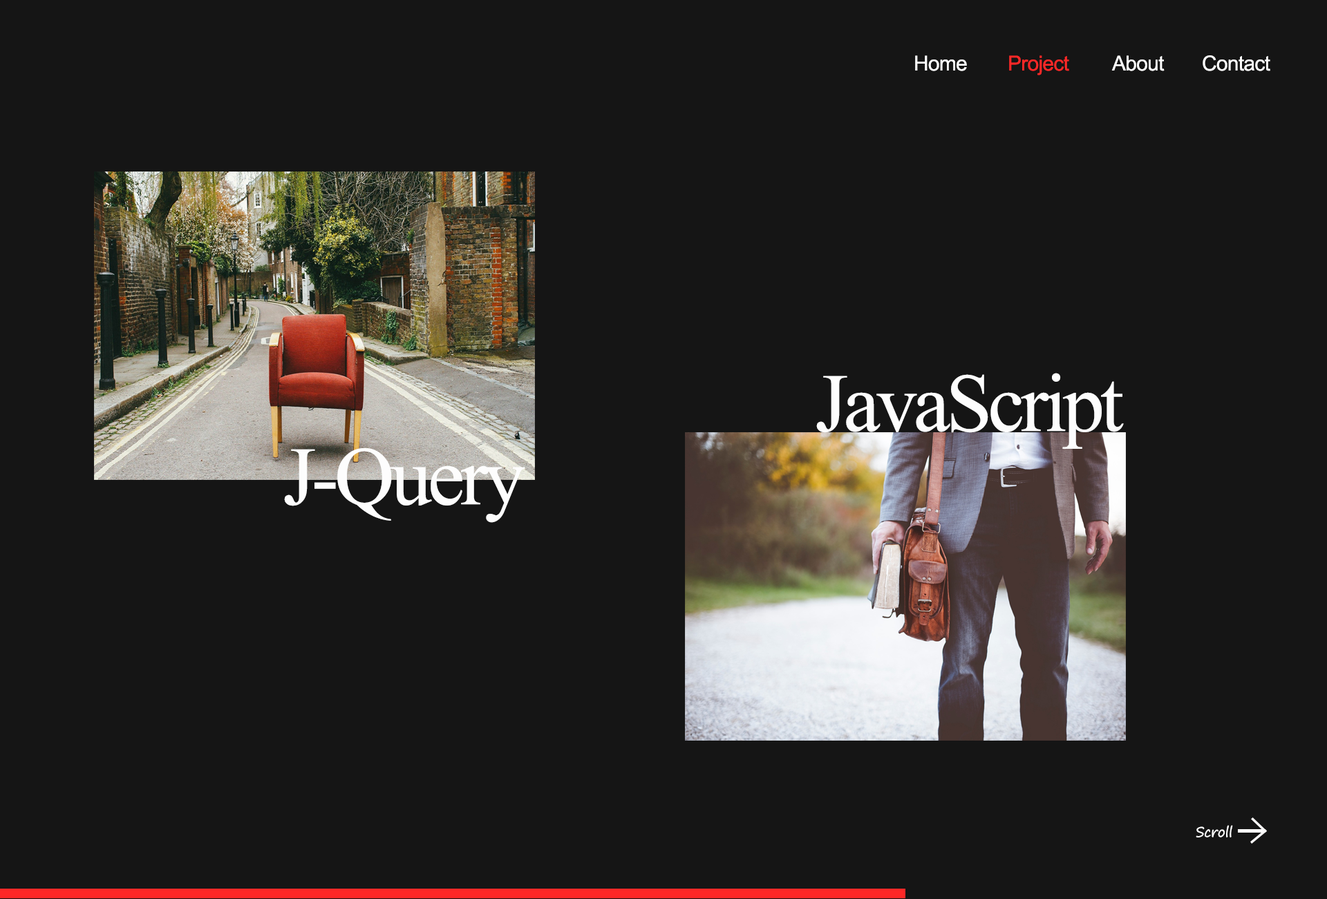
<style>
.page{position:relative;width:1327px;height:899px;background:#151515}
.page>*{position:absolute;margin:0}
.t1{font:20.7px "ArialMT";letter-spacing:-0.025em;color:#fefefe}
.t2{font:20.7px "ArialMT";letter-spacing:-0.025em;color:#fe2827}
.t3{font:20.7px "ArialMT";letter-spacing:-0.025em;color:#ffffff}
.t4{font:82.9px "TimesNewRomanPSMT";letter-spacing:-0.05em;color:#fdfdfd}
.t5{font:13.8px "SegoePrint";letter-spacing:-0.025em;color:#ffffff}
</style>
<div class="page">
<p class="t1" style="left:915px;top:55px;width:52px;height:16px">Home</p>
<p class="t2" style="left:1009px;top:55px;width:60px;height:20px">Project</p>
<p class="t3" style="left:1111px;top:55px;width:54px;height:16px">About</p>
<p class="t3" style="left:1203px;top:55px;width:67px;height:16px">Contact</p>
<p class="t4" style="left:816px;top:373px;width:308px;height:76px">JavaScript</p>
<p class="t4" style="left:284px;top:447px;width:241px;height:76px">J-Query</p>
<p class="t5" style="left:1196px;top:825px;width:37px;height:12px">Scroll</p>
</div>
